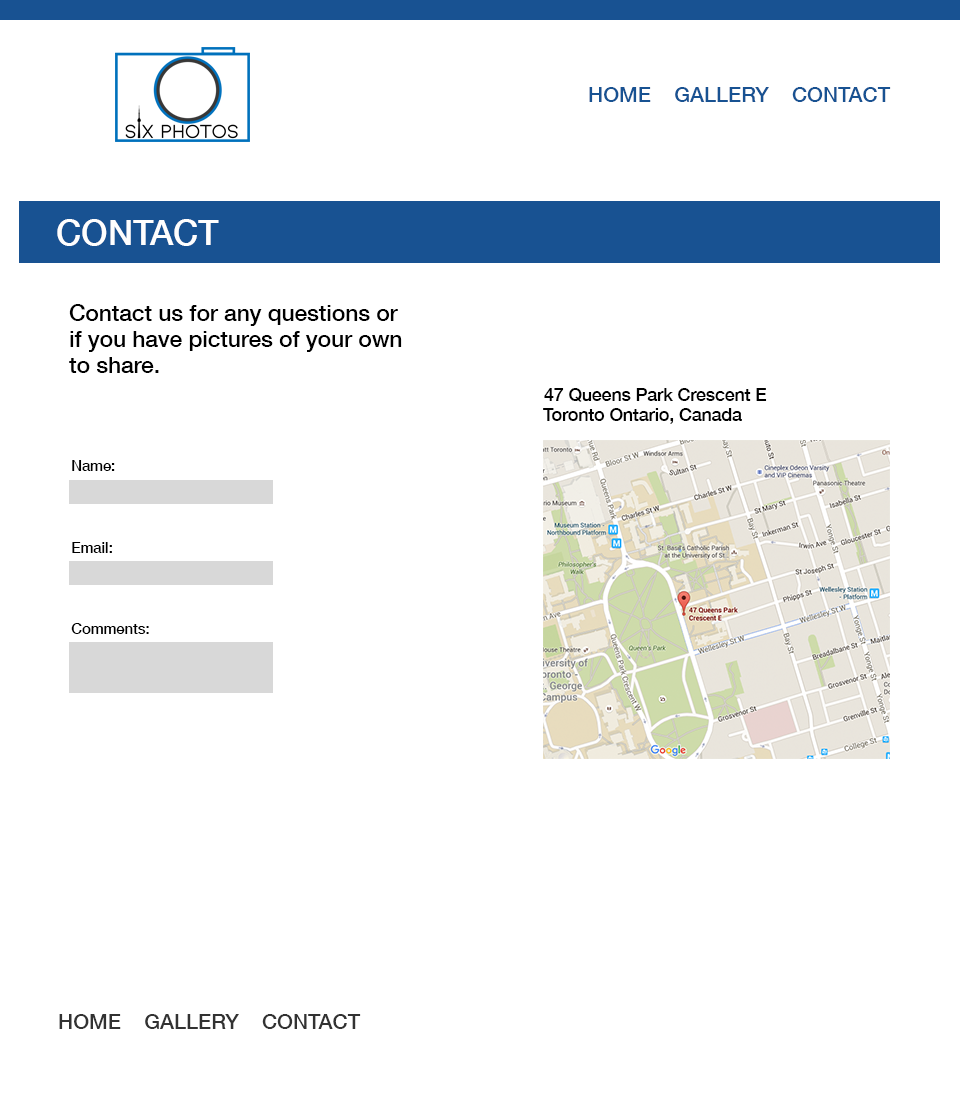
<style>
.page{position:relative;width:960px;height:1093px;background:#ffffff}
.page>*{position:absolute;margin:0}
.t1{font:20.9px "HelveticaNeue-Medium";color:#185292}
.t2{font:34.6px "HelveticaNeue-Medium";color:#fefefe}
.t3{font:22.6px/26px "HelveticaNeue-Medium";color:#000000}
.t4{font:17.6px "HelveticaNeue-Medium";color:#000000}
.t5{font:14.7px "HelveticaNeue-Medium";color:#000000}
.t6{font:20.9px "HelveticaNeue-Medium";color:#323232}
</style>
<div class="page">
<p class="t1" style="left:589px;top:87px;width:302px;height:15px">HOME    GALLERY    CONTACT</p>
<p class="t2" style="left:57px;top:219px;width:162px;height:27px">CONTACT</p>
<p class="t3" style="left:69px;top:304px;width:333px;height:69px">Contact us for any questions or<br>if you have pictures of your own<br>to share.</p>
<p class="t4" style="left:544px;top:388px;width:223px;height:14px">47 Queens Park Crescent E</p>
<p class="t4" style="left:543px;top:408px;width:199px;height:16px">Toronto Ontario, Canada</p>
<p class="t5" style="left:72px;top:460px;width:43px;height:11px">Name:</p>
<p class="t5" style="left:72px;top:542px;width:40px;height:11px">Email:</p>
<p class="t5" style="left:71px;top:623px;width:78px;height:11px">Comments:</p>
<p class="t6" style="left:59px;top:1014px;width:302px;height:15px">HOME    GALLERY    CONTACT</p>
</div>
